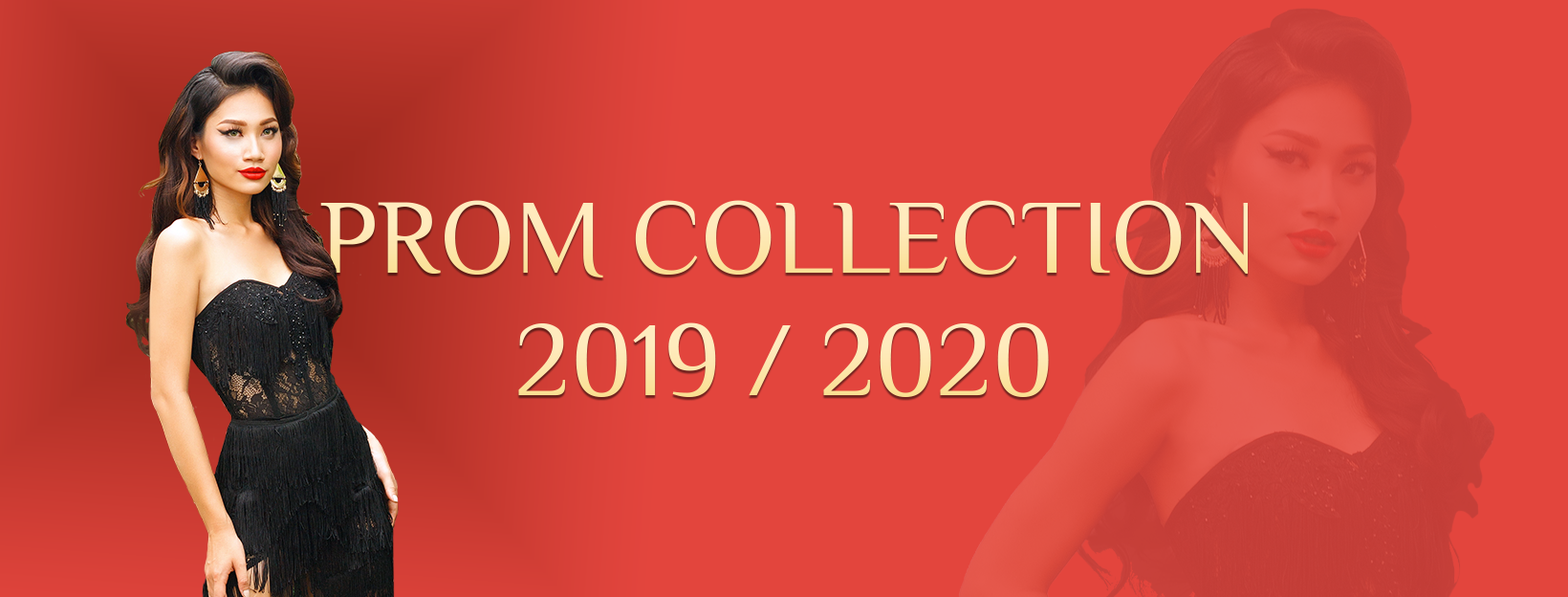
<style>
.page{position:relative;width:1568px;height:597px;background:#e3453d}
.page>*{position:absolute;margin:0}
.t1{font:105.2px "Philosopher-Regular";color:#fee9b5;text-transform:uppercase}
.t2{font:105.2px "Philosopher-Regular";color:#fee8b4;text-transform:uppercase}
</style>
<div class="page">
<p class="t1" style="left:320px;top:200px;width:928px;height:77px">Prom Collection</p>
<p class="t2" style="left:518px;top:322px;width:531px;height:75px">2019 / 2020</p>
</div>
